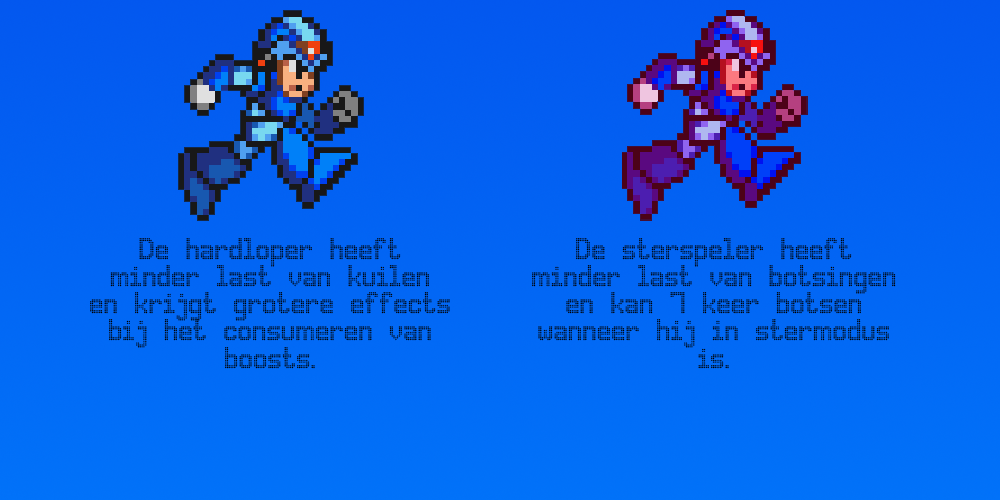
<style>
.page{position:relative;width:1000px;height:500px}
.page>*{position:absolute;margin:0}
.t1{font:18px/27.3px "AdvancedDotDigital-7";color:#000000}
</style>
<div class="page">
<p class="t1" style="left:90px;top:238px;width:360px;height:131px;text-align:center">De hardloper heeft minder last van kuilen en krijgt grotere effects bij het consumeren van boosts.</p>
<p class="t1" style="left:532px;top:238px;width:364px;height:131px;text-align:center">De sterspeler heeft minder last van botsingen en kan 7 keer botsen wanneer hij in stermodus is.</p>
</div>
